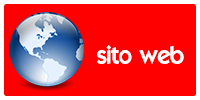
<style>
.page{position:relative;width:200px;height:100px;background:#ff0000}
.page>*{position:absolute;margin:0}
.t1{font:24px "ELEGANCE";color:#ffffff}
</style>
<div class="page">
<p class="t1" style="left:97px;top:45px;width:87px;height:19px">sito web</p>
</div>
